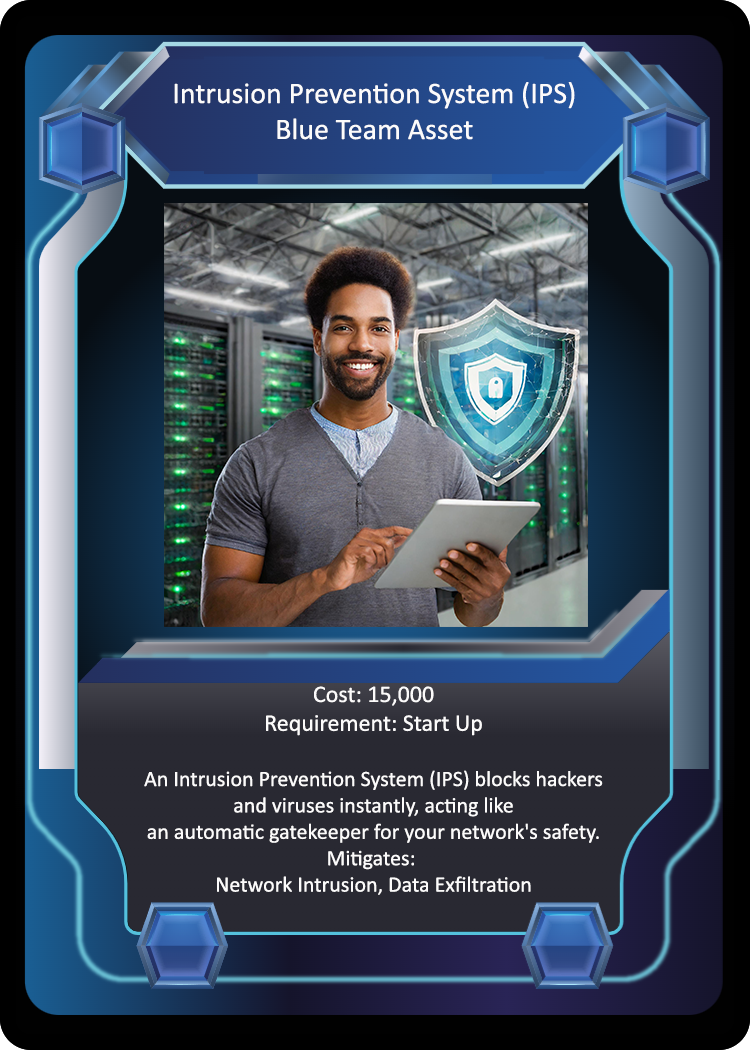
<style>
.page{position:relative;width:750px;height:1050px}
.page>*{position:absolute;margin:0}
.t1{font:30px "Calibri";color:#fcfbfb}
.t2{font:22px "Calibri";color:#fcfbfb}
.t3{font:24px "Calibri";color:#fcfbfb}
</style>
<div class="page">
<p class="t1" style="left:174px;top:82px;width:401px;height:58px;text-align:center">Intrusion Prevention System (IPS)<br>Blue Team Asset</p>
<p class="t2" style="left:144px;top:686px;width:459px;height:209px;text-align:center"><span class="t3">Cost: 15,000<br>Requirement: Start Up<br><br></span>An Intrusion Prevention System (IPS) blocks hackers<br> and viruses instantly, acting like <br>an automatic gatekeeper for your network's safety.<br>Mitigates: <br>Network Intrusion, Data Exfiltration</p>
</div>
